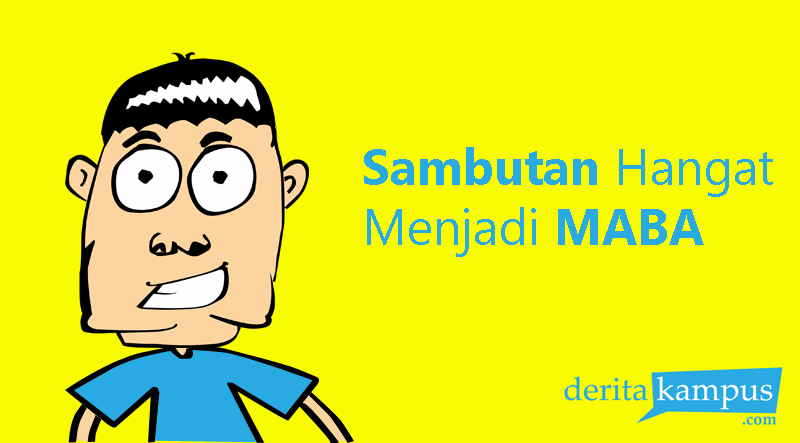
<style>
.page{position:relative;width:800px;height:443px;background:#f9fb02}
.page>*{position:absolute;margin:0}
.t1{font:50px "SegoeUI";color:#29aae3}
.t2{font:50px "SegoeUI-Bold";color:#29aae3}
</style>
<div class="page">
<p class="t1" style="left:364px;top:147px;width:409px;height:110px"><span class="t2">Sambutan </span>Hangat<br>Menjadi <span class="t2">MABA</span></p>
</div>
